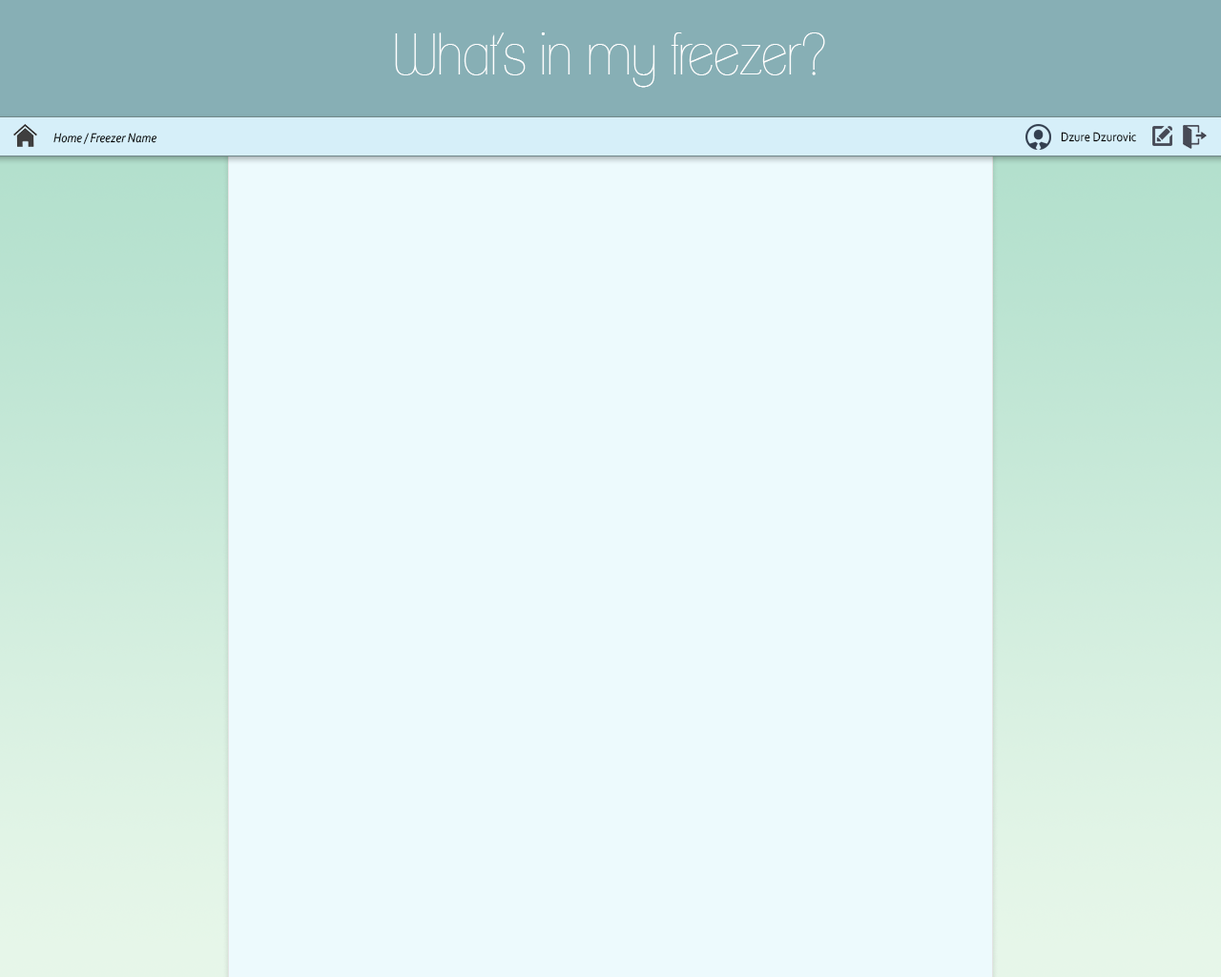
<style>
.page{position:relative;width:1221px;height:977px;background:#edfafd}
.page>*{position:absolute;margin:0}
.t1{font:57.2px "ClementePDaa-Hairline";color:#ffffff;scale:0.9 1}
.t2{font:13.4px "Corbel-Italic";color:#000000;scale:0.9 1}
.t3{font:13.4px "Corbel";color:#000000;scale:0.9 1}
</style>
<div class="page">
<p class="t1" style="left:395px;top:32px;width:430px;height:56px">What’s in my freezer?</p>
<p class="t2" style="left:53px;top:133px;width:104px;height:11px">Home / Freezer Name</p>
<p class="t3" style="left:1061px;top:132px;width:75px;height:10px">Dzure Dzurovic</p>
</div>
